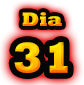
<style>
.page{position:relative;width:84px;height:85px;background:#070707}
.page>*{position:absolute;margin:0}
.t1{font:20px "Rockwell-ExtraBold"}
.t2{font:44px "Rockwell-ExtraBold"}
</style>
<div class="page">
<p class="t1" style="left:22px;top:12px;width:40px;height:14px">Dia</p>
<p class="t2" style="left:14px;top:42px;width:54px;height:31px">31</p>
</div>
